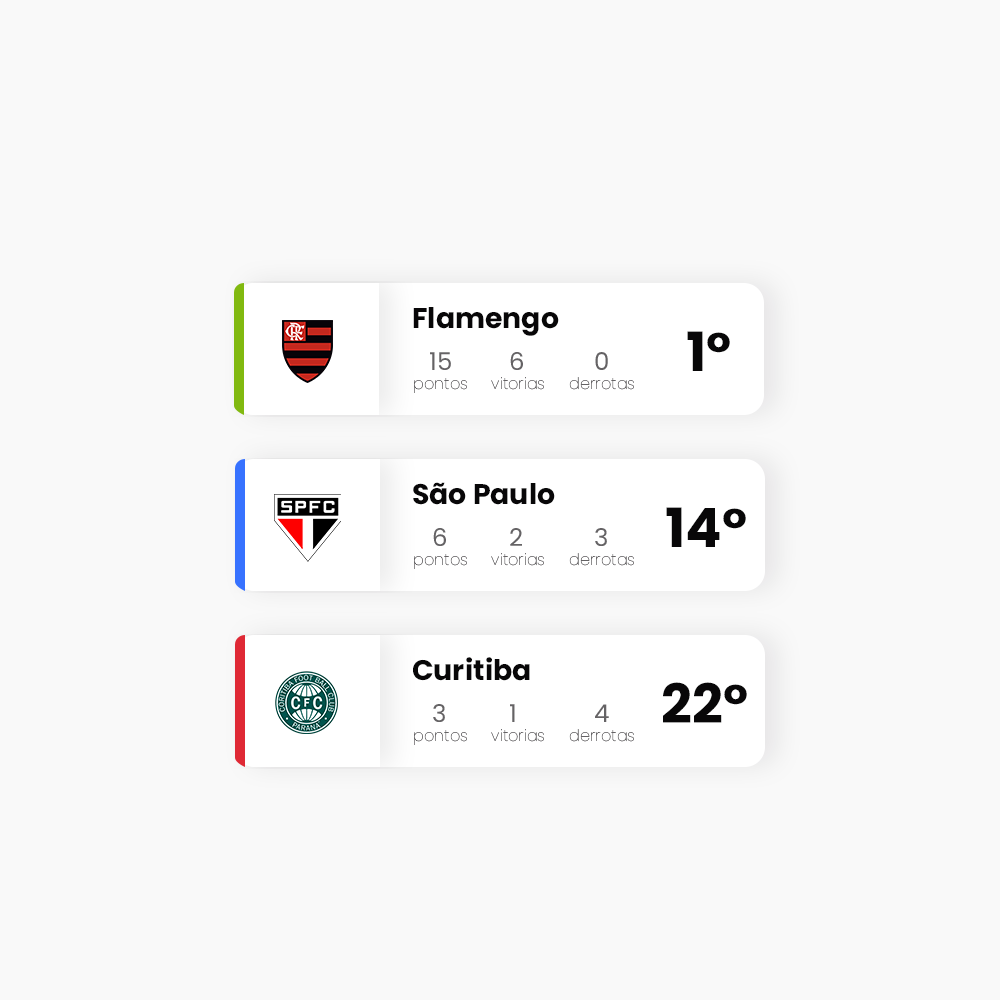
<style>
.page{position:relative;width:1000px;height:1000px;background:#f9f9f9}
.page>*{position:absolute;margin:0}
.t1{font:28.3px "Poppins-Bold";color:#080708}
.t2{font:54.2px "Poppins-Bold";color:#080708}
.t3{font:24.4px "Poppins-Regular";color:#656365}
.t4{font:16px "Poppins-Thin";color:#656365}
</style>
<div class="page">
<p class="t1" style="left:413px;top:307px;width:146px;height:29px">Flamengo</p>
<p class="t2" style="left:687px;top:331px;width:43px;height:40px">1°</p>
<p class="t3" style="left:430px;top:352px;width:21px;height:18px">15</p>
<p class="t3" style="left:510px;top:352px;width:13px;height:18px">6</p>
<p class="t3" style="left:595px;top:352px;width:13px;height:18px">0</p>
<p class="t4" style="left:491px;top:377px;width:53px;height:13px">vitorias</p>
<p class="t4" style="left:569px;top:377px;width:65px;height:13px">derrotas</p>
<p class="t4" style="left:414px;top:378px;width:53px;height:15px">pontos</p>
<p class="t1" style="left:413px;top:482px;width:142px;height:23px">São Paulo</p>
<p class="t2" style="left:666px;top:507px;width:80px;height:40px">14°</p>
<p class="t3" style="left:433px;top:528px;width:13px;height:18px">6</p>
<p class="t3" style="left:510px;top:528px;width:12px;height:18px">2</p>
<p class="t3" style="left:595px;top:528px;width:12px;height:18px">3</p>
<p class="t4" style="left:414px;top:554px;width:53px;height:15px">pontos</p>
<p class="t4" style="left:491px;top:553px;width:53px;height:13px">vitorias</p>
<p class="t4" style="left:569px;top:553px;width:65px;height:13px">derrotas</p>
<p class="t1" style="left:413px;top:657px;width:117px;height:24px">Curitiba</p>
<p class="t2" style="left:663px;top:682px;width:84px;height:41px">22°</p>
<p class="t3" style="left:433px;top:704px;width:12px;height:18px">3</p>
<p class="t3" style="left:510px;top:704px;width:5px;height:18px">1</p>
<p class="t3" style="left:595px;top:704px;width:14px;height:18px">4</p>
<p class="t4" style="left:414px;top:730px;width:53px;height:15px">pontos</p>
<p class="t4" style="left:491px;top:729px;width:53px;height:13px">vitorias</p>
<p class="t4" style="left:569px;top:729px;width:65px;height:13px">derrotas</p>
</div>
